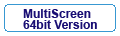
<style>
.page{position:relative;width:120px;height:36px;background:#ffffff}
.page>*{position:absolute;margin:0}
.t1{font:12px/11px "Arial-BoldMT";color:#190e74}
</style>
<div class="page">
<p class="t1" style="left:23px;top:9px;width:74px;height:20px">MultiScreen<br>64bit Version</p>
</div>
